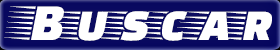
<style>
.page{position:relative;width:280px;height:50px;background:#ffffff}
.page>*{position:absolute;margin:0}
.t1{font:53.6px "FasterOne-Regular";color:#ffffff;scale:1.1 1}
</style>
<div class="page">
<p class="t1" style="left:4px;top:6px;width:268px;height:35px">Buscar</p>
</div>
